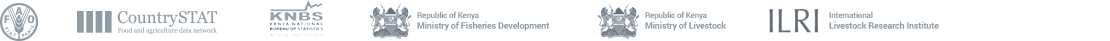
<style>
.page{position:relative;width:1110px;height:41px;background:#ffffff}
.page>*{position:absolute;margin:0}
.t1{font:9px "Roboto-Bold";letter-spacing:-0.022em;color:#8f9ca6}
.t2{font:8px "Roboto-Bold";letter-spacing:-0.022em;color:#8f9ca6}
</style>
<div class="page">
<p class="t1" style="left:417px;top:11px;width:133px;height:20px"><span class="t2">Republic of Kenya<br></span>Ministry of Fisheries Development</p>
<p class="t1" style="left:645px;top:11px;width:82px;height:20px"><span class="t2">Republic of Kenya<br></span>Ministry of Livestock</p>
<p class="t1" style="left:829px;top:11px;width:110px;height:18px"><span class="t2">International<br></span>Livestock Research Institute</p>
</div>
